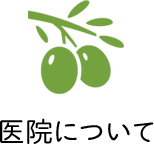
<style>
.page{position:relative;width:154px;height:144px;background:#ffffff}
.page>*{position:absolute;margin:0}
.t1{font:28px "TBChibiRGoPlusKPro-Regular";color:#000000}
</style>
<div class="page">
<p class="t1" style="left:0px;top:118px;width:154px;height:26px">医院について</p>
</div>
